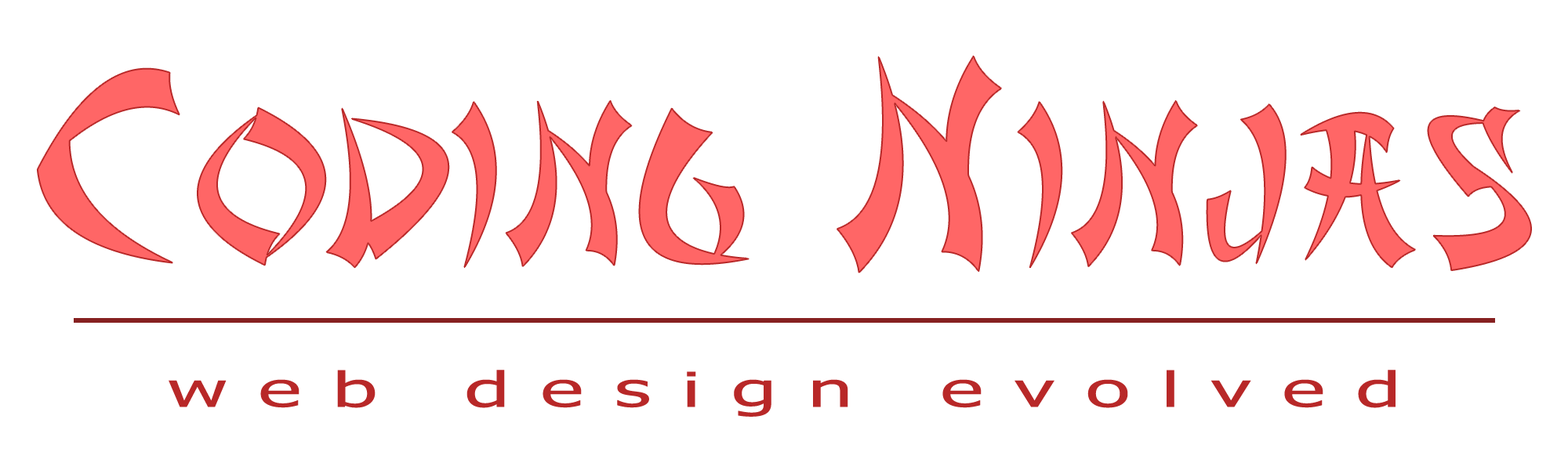
<style>
.page{position:relative;width:1568px;height:470px;background:#ffffff}
.page>*{position:absolute;margin:0}
.t1{font:202.4px "AsianDelight";letter-spacing:0.06em;color:#ff6666;scale:0.93 1}
.t2{font:264.6px "AsianDelight";letter-spacing:0.06em;color:#ff6666;scale:0.93 1}
.t3{font:48.2px "Tahoma";letter-spacing:0.392em;color:#b82828;scale:1.67 1}
</style>
<div class="page">
<p class="t1" style="left:37px;top:56px;width:1494px;height:217px"><span class="t2">C</span>ODING<span class="t2"> N</span>INJAS</p>
<p class="t3" style="left:169px;top:370px;width:1227px;height:47px">web design evolved</p>
</div>
